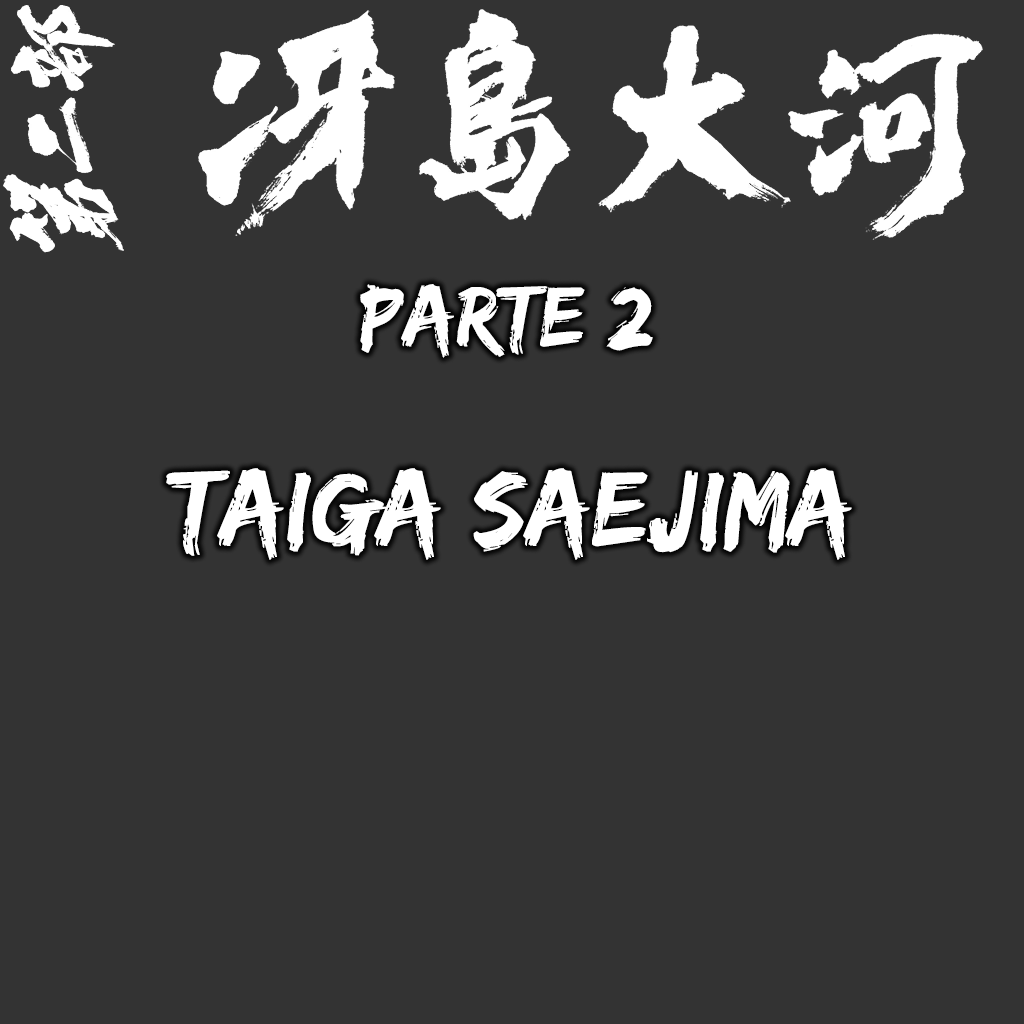
<style>
.page{position:relative;width:1024px;height:1024px;background:#333333}
.page>*{position:absolute;margin:0}
.t1{font:88.5px "EdoSZ";color:#ffffff}
.t2{font:109.9px "EdoSZ";color:#ffffff}
</style>
<div class="page">
<p class="t1" style="left:360px;top:284px;width:293px;height:74px">parte 2</p>
<p class="t2" style="left:166px;top:468px;width:686px;height:92px">Taiga Saejima</p>
</div>
